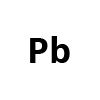
<style>
.page{position:relative;width:100px;height:100px;background:#ffffff}
.page>*{position:absolute;margin:0}
.t1{font:35px "OpenSans-Bold";color:#000000}
</style>
<div class="page">
<p class="t1" style="left:30px;top:36px;width:40px;height:27px">Pb</p>
</div>
